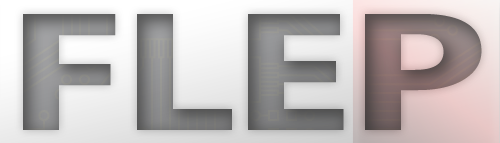
<style>
.page{position:relative;width:500px;height:143px}
.page>*{position:absolute;margin:0}
.t1{font:165.7px "SegoeUI-Bold";letter-spacing:-0.02em;color:#818181;scale:1.37 1}
</style>
<div class="page">
<p class="t1" style="left:23px;top:14px;width:459px;height:116px;opacity:0.66">FLEP</p>
</div>
